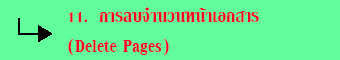
<style>
.page{position:relative;width:340px;height:60px;background:#62fe9c}
.page>*{position:absolute;margin:0}
.t1{font:25px "KodchiangUPCBold";color:#ff002a}
</style>
<div class="page">
<p class="t1" style="left:68px;top:7px;width:191px;height:49px">11.  การลบจํานวนหน้าเอกสาร <br>(Delete Pages)</p>
</div>
